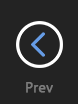
<style>
.page{position:relative;width:78px;height:104px;background:#232323}
.page>*{position:absolute;margin:0}
.t1{font:14px "SegoeUI";color:#7c7c7c;font-weight:bold}
</style>
<div class="page">
<p class="t1" style="left:26px;top:82px;width:27px;height:11px">Prev</p>
</div>
